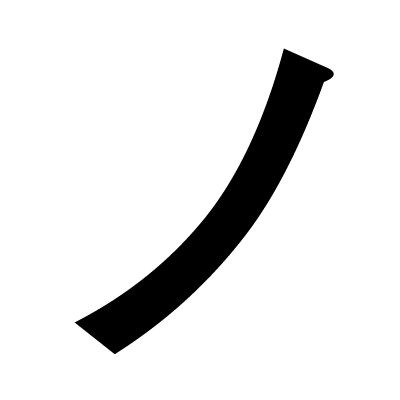
<style>
.page{position:relative;width:400px;height:400px;background:#ffffff}
.page>*{position:absolute;margin:0}
.t1{font:424.8px "MS-PGothic";color:#000000}
</style>
<div class="page">
<p class="t1" style="left:74px;top:48px;width:260px;height:306px">ノ</p>
</div>
